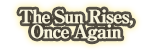
<style>
.page{position:relative;width:151px;height:50px;background:#ffffff}
.page>*{position:absolute;margin:0}
.t1{font:18px/15px "RyuminPro-ExBold";letter-spacing:-0.08em;color:#f9f5dd;font-weight:bold}
</style>
<div class="page">
<p class="t1" style="left:19px;top:9px;width:114px;height:33px;text-align:center">The Sun Rises,<br>Once Again</p>
</div>
